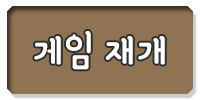
<style>
.page{position:relative;width:200px;height:100px;background:#907353}
.page>*{position:absolute;margin:0}
.t1{font:48.9px "YanoljaYacheR";color:#ffffff}
</style>
<div class="page">
<p class="t1" style="left:34px;top:31px;width:131px;height:39px">게임 재개</p>
</div>
